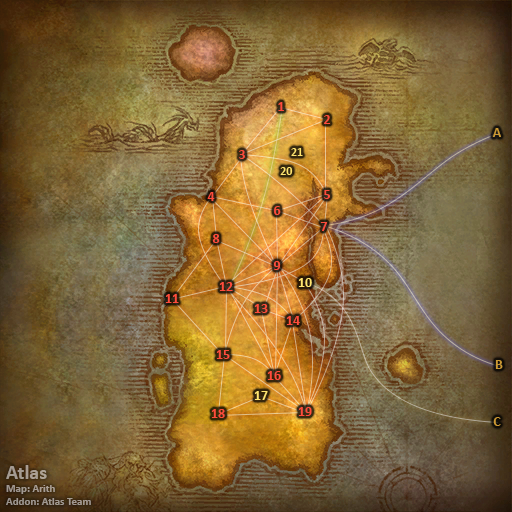
<style>
.page{position:relative;width:512px;height:512px}
.page>*{position:absolute;margin:0}
.t1{font:14px "Calibri-Bold";color:#ff4c3c}
.t2{font:14px "Calibri-Bold";color:#cc9933}
.t3{font:12px "Calibri-Bold";color:#fee570}
.t4{font:14px "Calibri-Bold";color:#fee570}
.t5{font:11px "Calibri-Bold";color:#a49b92}
.t6{font:20px "Calibri-Bold";color:#a49b92}
</style>
<div class="page">
<p class="t1" style="left:278px;top:102px;width:6px;height:9px">1</p>
<p class="t1" style="left:324px;top:115px;width:7px;height:9px">2</p>
<p class="t2" style="left:492px;top:128px;width:9px;height:9px">A</p>
<p class="t1" style="left:239px;top:150px;width:6px;height:9px">3</p>
<p class="t3" style="left:291px;top:148px;width:12px;height:8px">21</p>
<p class="t3" style="left:280px;top:167px;width:13px;height:8px">20</p>
<p class="t1" style="left:207px;top:192px;width:8px;height:9px">4</p>
<p class="t1" style="left:324px;top:190px;width:6px;height:9px">5</p>
<p class="t1" style="left:274px;top:206px;width:7px;height:9px">6</p>
<p class="t1" style="left:320px;top:222px;width:8px;height:9px">7</p>
<p class="t1" style="left:212px;top:234px;width:8px;height:9px">8</p>
<p class="t1" style="left:273px;top:261px;width:8px;height:9px">9</p>
<p class="t4" style="left:298px;top:278px;width:14px;height:9px">10</p>
<p class="t1" style="left:165px;top:294px;width:14px;height:9px">11</p>
<p class="t1" style="left:219px;top:282px;width:14px;height:9px">12</p>
<p class="t1" style="left:254px;top:304px;width:14px;height:9px">13</p>
<p class="t1" style="left:286px;top:316px;width:14px;height:9px">14</p>
<p class="t1" style="left:216px;top:350px;width:14px;height:9px">15</p>
<p class="t2" style="left:495px;top:360px;width:8px;height:9px">B</p>
<p class="t1" style="left:267px;top:371px;width:14px;height:9px">16</p>
<p class="t4" style="left:254px;top:391px;width:14px;height:9px">17</p>
<p class="t1" style="left:211px;top:409px;width:14px;height:9px">18</p>
<p class="t1" style="left:298px;top:407px;width:14px;height:9px">19</p>
<p class="t2" style="left:493px;top:417px;width:8px;height:9px">C</p>
<p class="t5" style="left:6px;top:465px;width:85px;height:40px"><span class="t6">Atlas<br></span>Map: Arith<br>Addon: Atlas Team</p>
</div>
